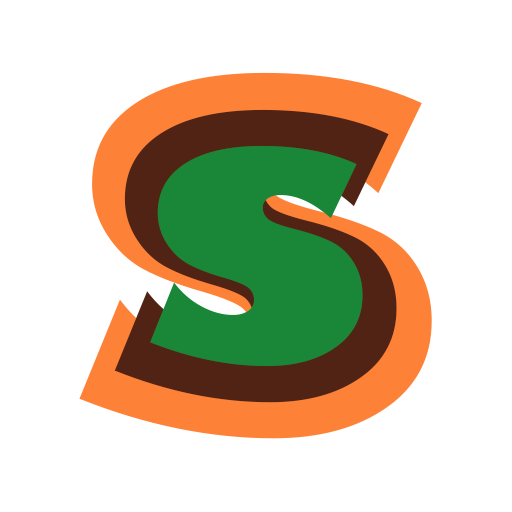
<style>
.page{position:relative;width:512px;height:512px;background:#ffffff}
.page>*{position:absolute;margin:0}
.t1{font:600px "GillSans-UltraBold"}
.t2{font:480px "GillSans-UltraBold"}
.t3{font:362px "GillSans-UltraBold";color:#1a8738}
</style>
<div class="page">
<p class="t1" style="left:79px;top:72px;width:353px;height:367px">s</p>
<p class="t2" style="left:114px;top:109px;width:283px;height:294px">s</p>
<p class="t3" style="left:150px;top:145px;width:213px;height:221px">s</p>
</div>
